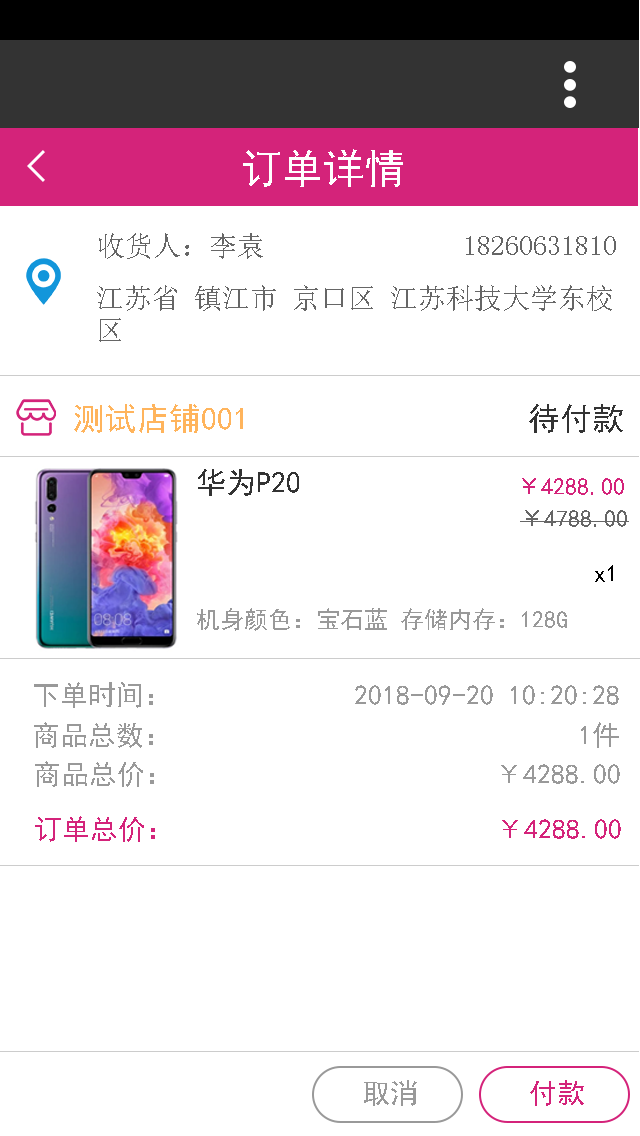
<style>
.page{position:relative;width:640px;height:1136px;background:#ffffff}
.page>*{position:absolute;margin:0}
.t1{font:70px "SimHei";color:#ffffff}
.t2{font:28px "NSimSun";color:#666666}
.t3{font:28px/32px "NSimSun";color:#666666}
.t4{font:55px "SimHei";color:#ffb45c}
.t5{font:55px "SimHei";color:#333333}
.t6{font:30px "SimHei";color:#333333}
.t7{font:24px "SimHei";color:#d4237a}
.t8{font:24px "SimHei";color:#666666}
.t9{font:24px "SimHei";color:#000000}
.t10{font:24px "SimHei";color:#999999}
.t11{font:48px "SimHei";color:#999999}
.t12{font:48px "SimHei";color:#d4237a}
</style>
<div class="page">
<p class="t1" style="left:243px;top:149px;width:160px;height:38px">订单详情</p>
<p class="t2" style="left:99px;top:233px;width:164px;height:26px">收货人：李袁</p>
<p class="t2" style="left:466px;top:236px;width:150px;height:19px">18260631810</p>
<p class="t3" style="left:97px;top:285px;width:515px;height:57px">江苏省 镇江市 京口区 江苏科技大学东校<br>区</p>
<p class="t4" style="left:74px;top:404px;width:169px;height:29px">测试店铺001</p>
<p class="t5" style="left:529px;top:404px;width:94px;height:29px">待付款</p>
<p class="t6" style="left:198px;top:469px;width:101px;height:27px">华为P20</p>
<p class="t7" style="left:522px;top:478px;width:102px;height:17px">￥4288.00</p>
<p class="t8" style="left:520px;top:510px;width:109px;height:17px">￥4788.00</p>
<p class="t9" style="left:595px;top:565px;width:18px;height:17px">x1</p>
<p class="t10" style="left:197px;top:608px;width:370px;height:23px">机身颜色：宝石蓝 存储内存：128G</p>
<p class="t11" style="left:34px;top:682px;width:585px;height:26px">下单时间：             2018-09-20 10:20:28</p>
<p class="t11" style="left:34px;top:722px;width:585px;height:26px">商品总数：                             1件</p>
<p class="t11" style="left:35px;top:761px;width:585px;height:26px">商品总价：                       ￥4288.00</p>
<p class="t12" style="left:35px;top:816px;width:586px;height:26px">订单总价：                       ￥4288.00</p>
<p class="t11" style="left:364px;top:1080px;width:53px;height:26px">取消</p>
<p class="t12" style="left:530px;top:1080px;width:54px;height:26px">付款</p>
</div>
